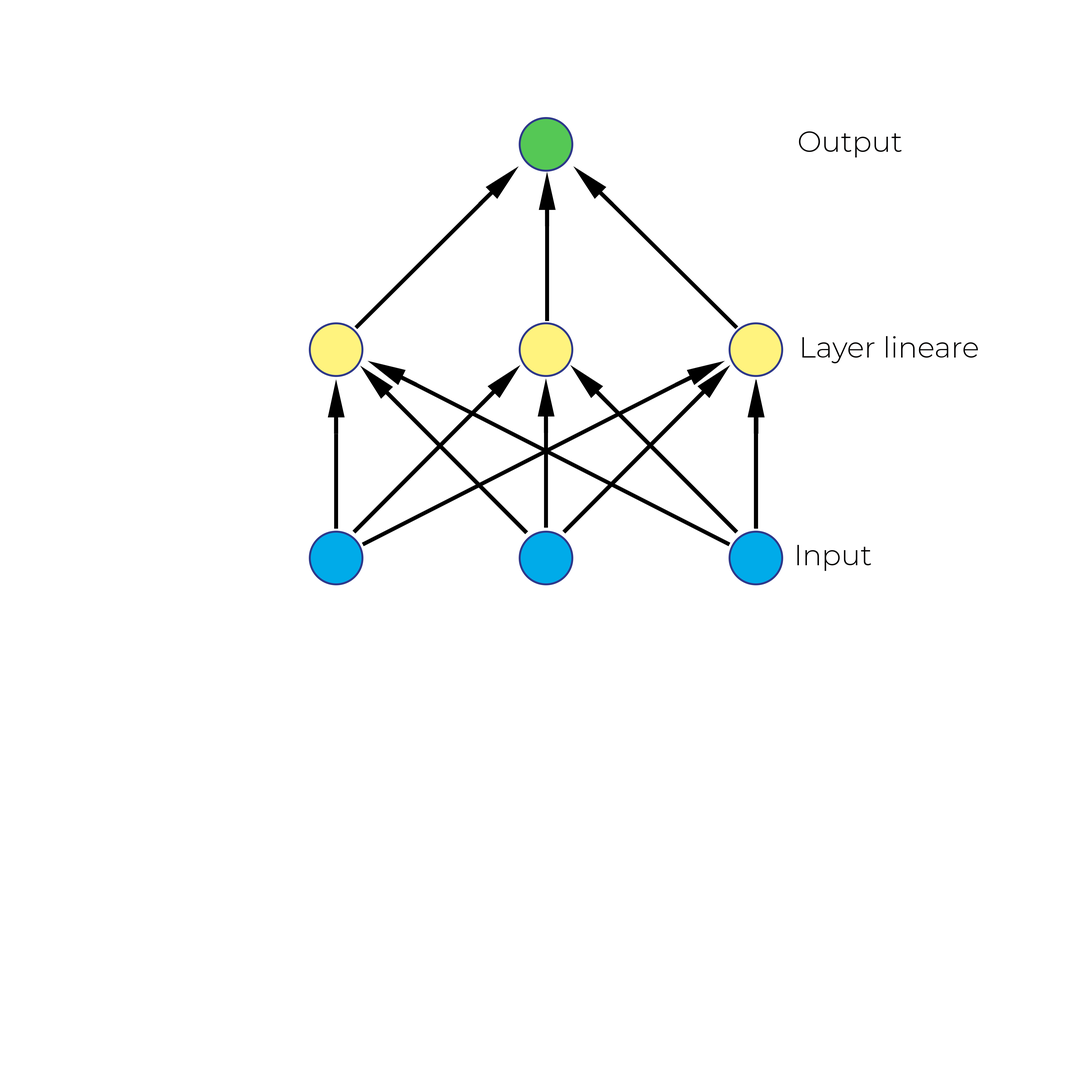
<style>
.page{position:relative;width:1092px;height:1092px;background:#ffffff}
.page>*{position:absolute;margin:0}
.t1{font:28.8px "Montserrat-Light";color:#010000}
</style>
<div class="page">
<p class="t1" style="left:799px;top:131px;width:103px;height:26px">Output</p>
<p class="t1" style="left:802px;top:336px;width:176px;height:27px">Layer lineare</p>
<p class="t1" style="left:797px;top:545px;width:74px;height:26px">Input</p>
</div>
